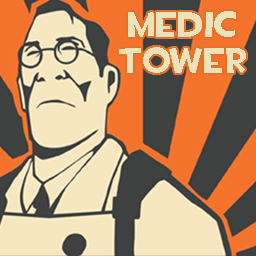
<style>
.page{position:relative;width:256px;height:256px;background:#f6e7c1}
.page>*{position:absolute;margin:0}
.t1{font:36px/36px "TF2Build";color:#ede3bb}
</style>
<div class="page">
<p class="t1" style="left:119px;top:11px;width:127px;height:62px;text-align:center">MEDIC<br>Tower</p>
</div>
